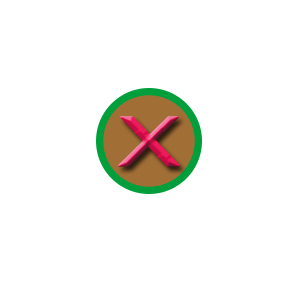
<style>
.page{position:relative;width:283px;height:283px;background:#ffffff}
.page>*{position:absolute;margin:0}
.t1{font:78.1px "LucidaConsole";font-weight:bold;scale:1.32 1}
</style>
<div class="page">
<p class="t1" style="left:118px;top:116px;width:62px;height:51px">X</p>
</div>
